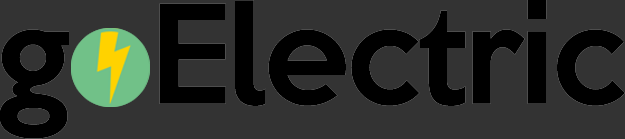
<style>
.page{position:relative;width:625px;height:139px;background:#333333}
.page>*{position:absolute;margin:0}
.t1{font:125px "KeepCalm-Medium";letter-spacing:-0.025em;color:#000000}
</style>
<div class="page">
<p class="t1" style="left:0px;top:0px;width:625px;height:139px">goElectric</p>
</div>
